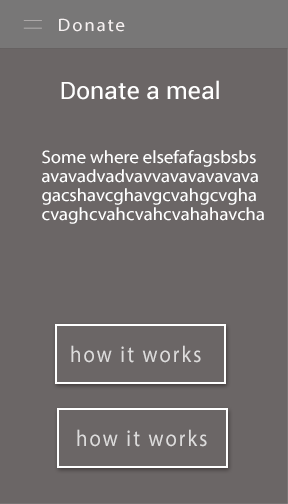
<style>
.page{position:relative;width:288px;height:504px;background:#6b6666}
.page>*{position:absolute;margin:0}
.t1{font:18px "MyriadPro-Regular";letter-spacing:0.1em;color:#f6f1f1;scale:1.04 1}
.t2{font:24px "Roboto-Regular";color:#ffffff;scale:1.04 1}
.t3{font:18px/18.9px "MyriadPro-Regular";color:#ffffff;scale:1.04 1}
.t4{font:23px "MyriadPro-Regular";letter-spacing:0.1em;color:#dddcdc;scale:0.89 1}
</style>
<div class="page">
<p class="t1" style="left:59px;top:18px;width:66px;height:14px">Donate</p>
<p class="t2" style="left:61px;top:80px;width:158px;height:20px">Donate a meal</p>
<p class="t3" style="left:42px;top:150px;width:222px;height:74px">Some where elsefafagsbsbs<br>avavadvadvavvavavavavava<br>gacshavcghavgcvahgcvgha<br>cvaghcvahcvahcvahahavcha</p>
<p class="t4" style="left:71px;top:345px;width:130px;height:18px">how it works</p>
<p class="t4" style="left:77px;top:429px;width:130px;height:18px">how it works</p>
</div>
